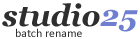
<style>
.page{position:relative;width:140px;height:39px;background:#ffffff}
.page>*{position:absolute;margin:0}
.t1{font:30px "Georgia-BoldItalic";color:#2e2e2e}
.t2{font:30px "Georgia-BoldItalic";color:#6e7fd2}
.t3{font:12px "Calibri";color:#303030}
</style>
<div class="page">
<p class="t1" style="left:2px;top:3px;width:136px;height:29px">studio<span class="t2">25</span></p>
<p class="t3" style="left:16px;top:28px;width:66px;height:9px">batch rename</p>
</div>
